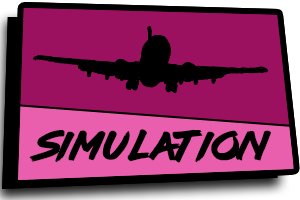
<style>
.page{position:relative;width:300px;height:200px;background:#9c115f}
.page>*{position:absolute;margin:0}
.t1{font:36px "lazer84";color:#000000}
</style>
<div class="page">
<p class="t1" style="left:29px;top:129px;width:242px;height:34px">simulation</p>
</div>
